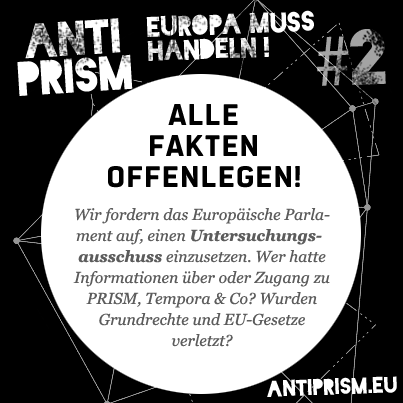
<style>
.page{position:relative;width:403px;height:403px;background:#ffffff}
.page>*{position:absolute;margin:0}
.t1{font:26.8px/23.9px "Blackout-Midnight";color:#ffffff}
.t2{font:45.7px/37.2px "Blackout-Midnight";color:#ffffff}
.t3{font:74.8px "MyriadPro-Regular"}
.t4{font:74.8px "Blackout-Midnight"}
.t5{font:33px/31px "PoliticsHead-Bold";color:#000000}
.t6{font:15.8px/21px "Georgia-Italic";color:#5c5c5c}
.t7{font:15.8px/21px "Georgia-BoldItalic";color:#5c5c5c}
.t8{font:21.6px "Blackout-Midnight";color:#ffffff}
</style>
<div class="page">
<p class="t1" style="left:146px;top:10px;width:168px;height:51px;rotate:-2deg">EUROPA MUSS<br>HANDELN !</p>
<p class="t2" style="left:17px;top:18px;width:116px;height:78px;text-align:center;rotate:-4deg">ANTI<br>PRISM</p>
<p class="t3" style="left:317px;top:29px;width:69px;height:57px;rotate:-2deg">#<span class="t4">2</span></p>
<p class="t5" style="left:108px;top:104px;width:192px;height:84px;text-align:center">ALLE<br>FAKTEN<br>OFFENLEGEN!</p>
<p class="t6" style="left:73px;top:208px;width:257px;height:139px;text-align:center">Wir fordern das Europäische Parlament auf, einen <span class="t7">Untersuchungs-ausschuss</span> einzusetzen. Wer hatte Informationen über oder Zugang zu PRISM, Tempora &amp; Co? Wurden<br>Grundrechte und EU-Gesetze<br>verletzt?</p>
<p class="t8" style="left:267px;top:376px;width:130px;height:21px;rotate:-2deg">antiprism.eu</p>
</div>
